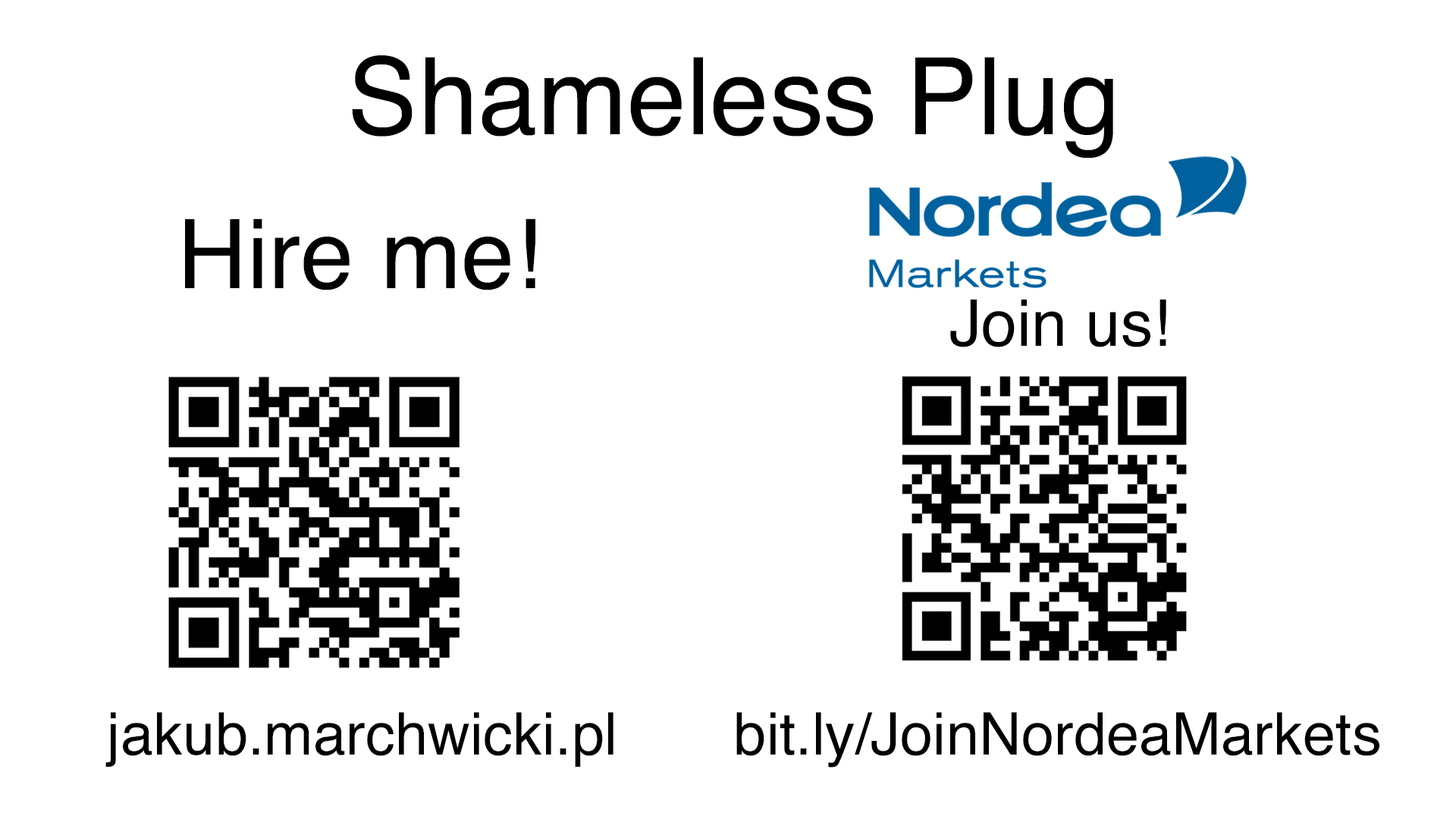
<style>
.page{position:relative;width:1456px;height:819px;background:#ffffff}
.page>*{position:absolute;margin:0}
.t1{font:107px "Helvetica";color:#000000}
.t2{font:96.3px "Helvetica";color:#000000}
.t3{font:64.2px "Helvetica";color:#000000}
.t4{font:58.9px "Helvetica";color:#000000}
</style>
<div class="page">
<p class="t1" style="left:352px;top:55px;width:761px;height:103px">Shameless Plug</p>
<p class="t2" style="left:185px;top:218px;width:350px;height:72px">Hire me!</p>
<p class="t3" style="left:950px;top:300px;width:216px;height:47px">Join us!</p>
<p class="t4" style="left:105px;top:712px;width:508px;height:55px">jakub.marchwicki.pl</p>
<p class="t4" style="left:736px;top:712px;width:643px;height:55px">bit.ly/JoinNordeaMarkets</p>
</div>
